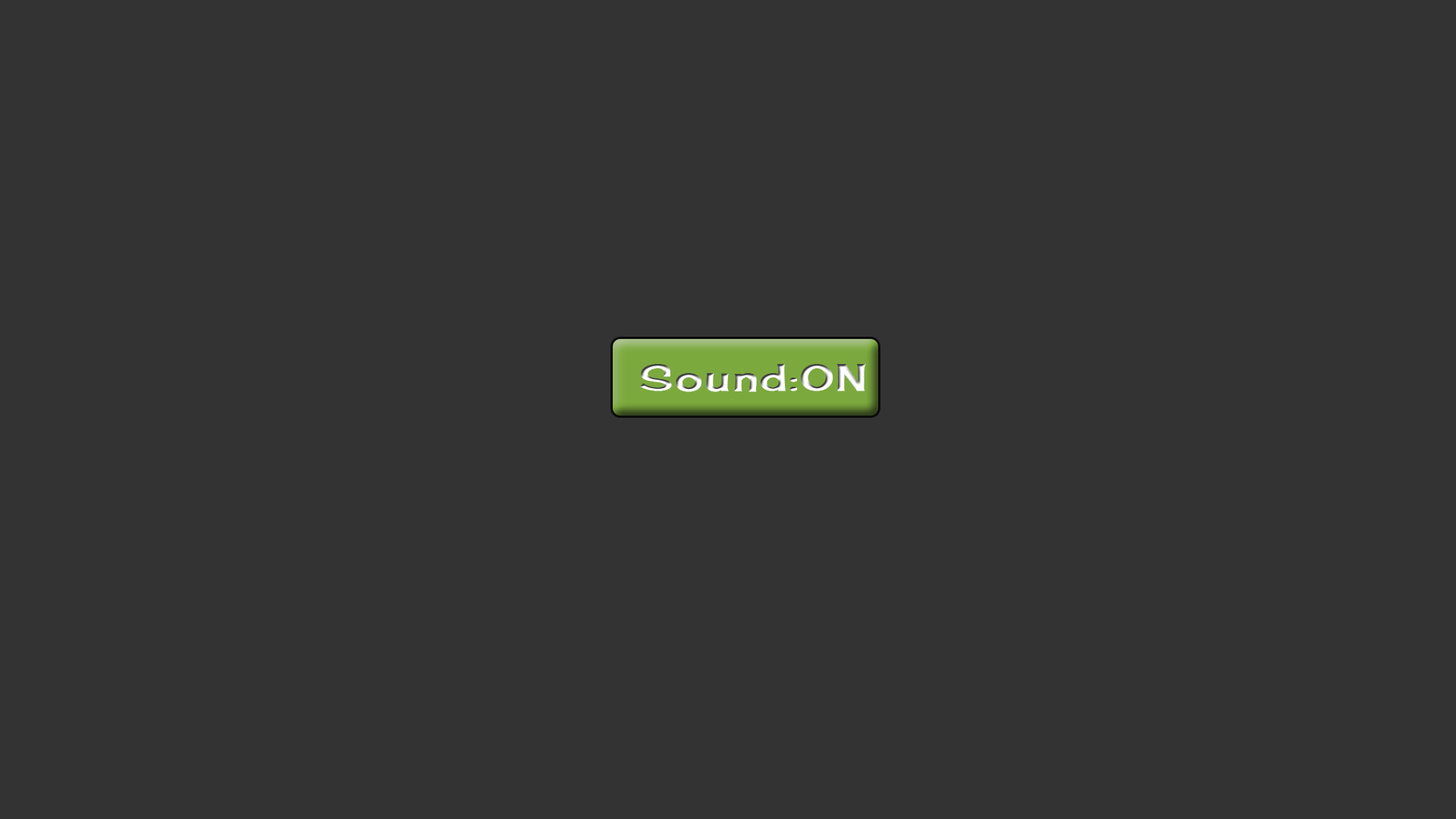
<style>
.page{position:relative;width:1456px;height:819px;background:#333333}
.page>*{position:absolute;margin:0}
.t1{font:36.4px "CherryCreamSoda";letter-spacing:0.06em;font-weight:bold}
</style>
<div class="page">
<p class="t1" style="left:639px;top:364px;width:227px;height:28px">Sound:ON</p>
</div>
